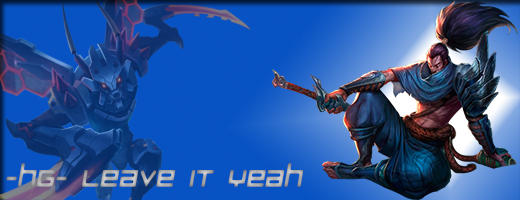
<style>
.page{position:relative;width:520px;height:200px}
.page>*{position:absolute;margin:0}
.t1{font:52.6px "LuggageRoundRegular";color:#aeaeae;font-style:italic;scale:0.96 1}
</style>
<div class="page">
<p class="t1" style="left:6px;top:163px;width:298px;height:24px">-hg- Leave it Yeah</p>
</div>
